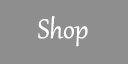
<style>
.page{position:relative;width:128px;height:64px;background:#8e8e8e}
.page>*{position:absolute;margin:0}
.t1{font:33px "Gabriola";color:#ffffff}
</style>
<div class="page">
<p class="t1" style="left:38px;top:16px;width:50px;height:31px">Shop</p>
</div>
